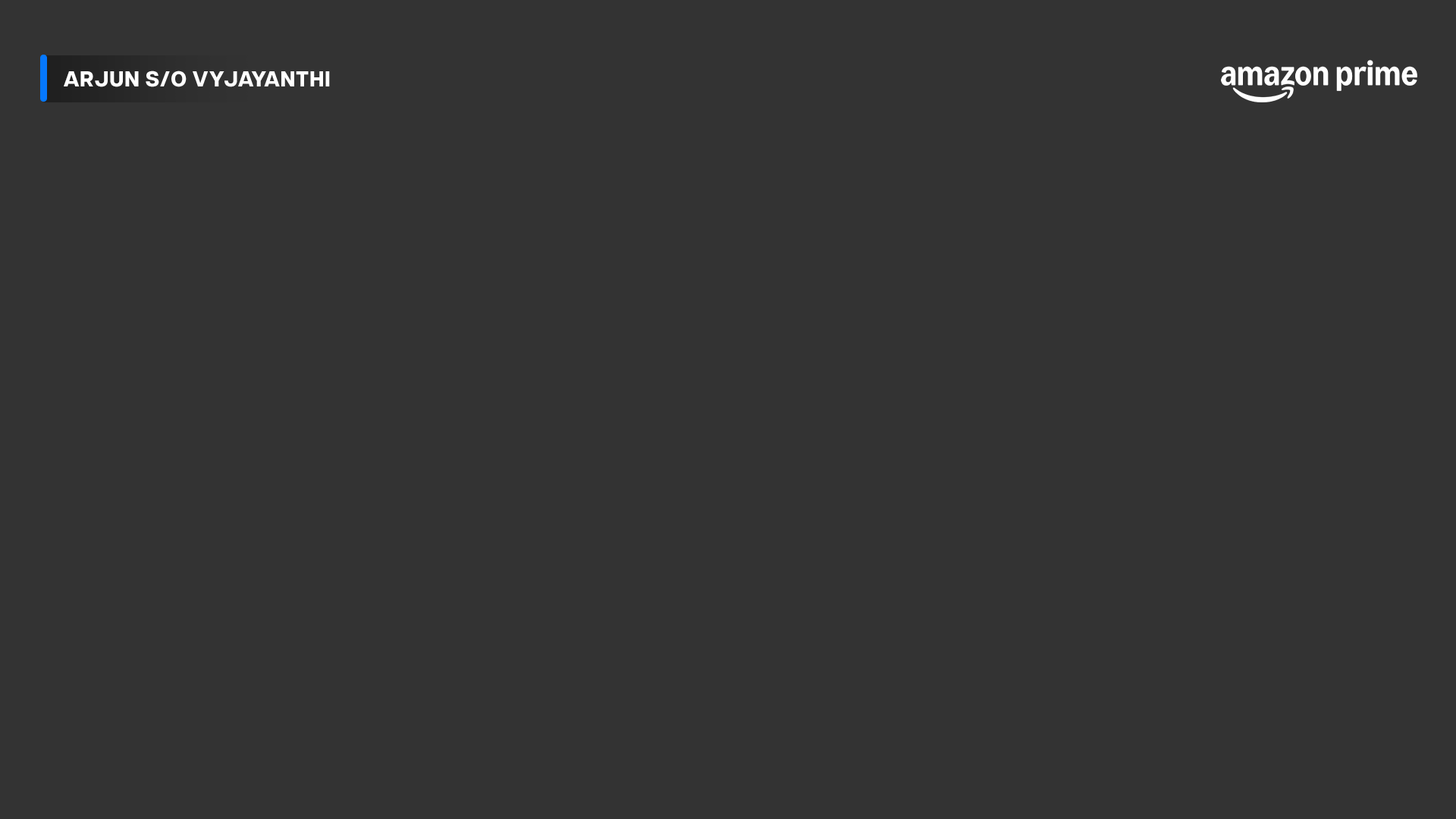
<style>
.page{position:relative;width:1456px;height:819px;background:#333333}
.page>*{position:absolute;margin:0}
.t1{font:21.7px "ArticulatCF-ExtraBold";letter-spacing:0.01em;color:#ffffff;text-transform:uppercase}
</style>
<div class="page">
<p class="t1" style="left:64px;top:71px;width:266px;height:16px">ARJUN S/O VYJAYANTHI</p>
</div>
